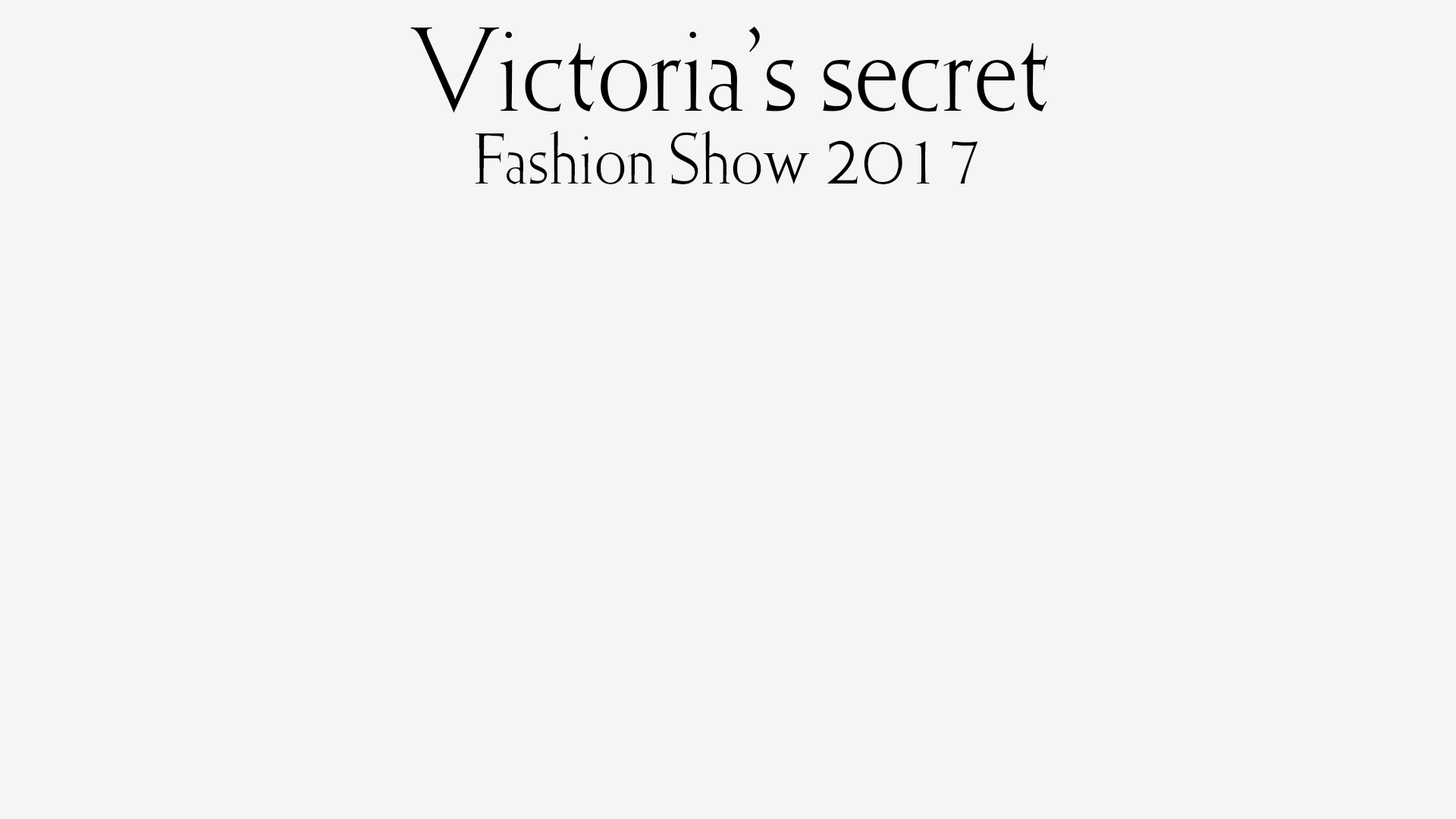
<style>
.page{position:relative;width:1456px;height:819px;background:#f6f4f4}
.page>*{position:absolute;margin:0}
.t1{font:113.7px "Victoria";letter-spacing:0.005em;color:#000000}
.t2{font:68.2px "Victoria";letter-spacing:0.005em;color:#000000}
</style>
<div class="page">
<p class="t1" style="left:410px;top:27px;width:638px;height:86px">Victoria’s secret</p>
<p class="t2" style="left:475px;top:130px;width:503px;height:54px">Fashion Show 2017</p>
</div>
